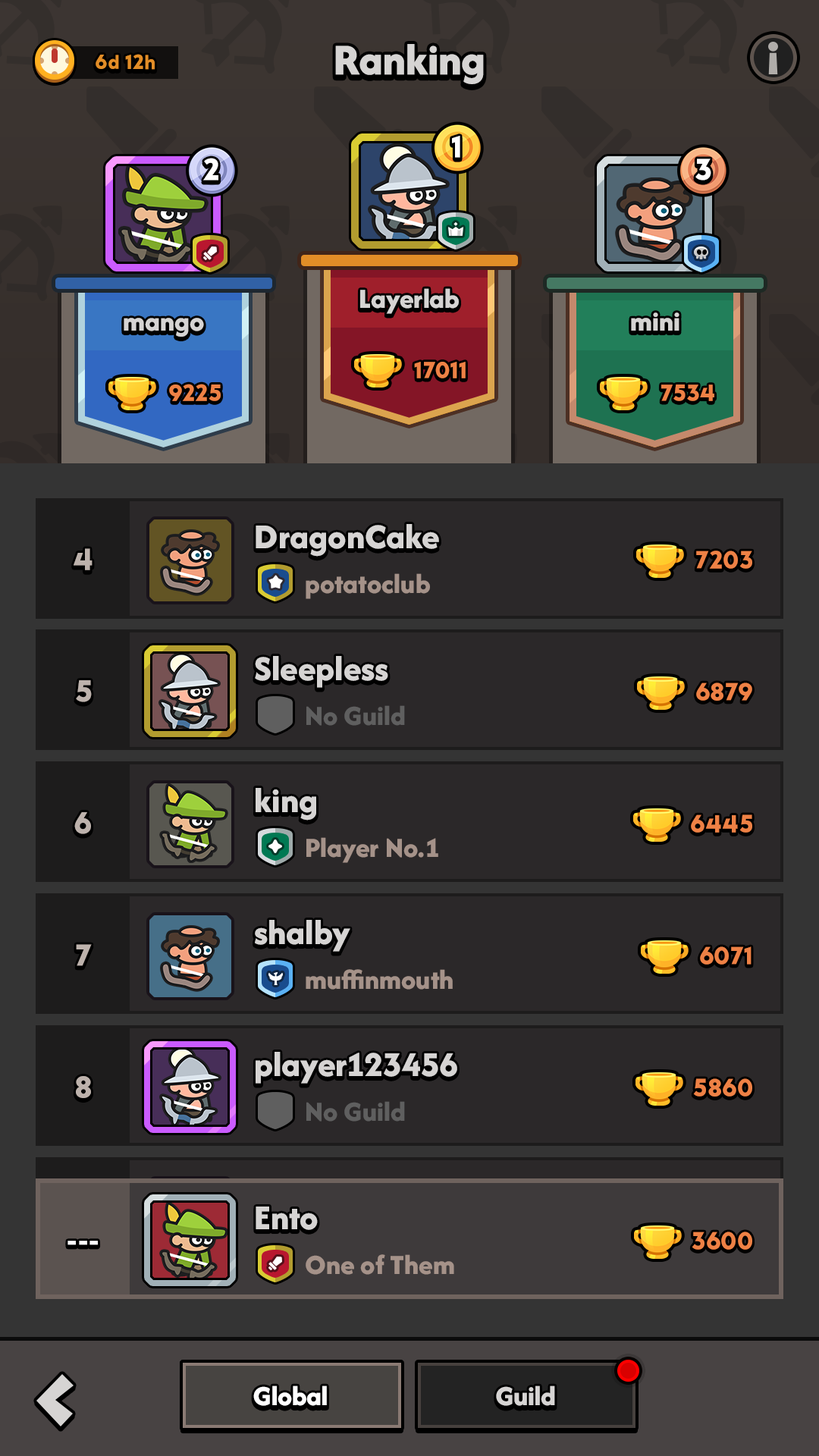
<style>
.page{position:relative;width:819px;height:1456px;background:#2b2829}
.page>*{position:absolute;margin:0}
.t1{font:21.2px "LTAvocado-Bold";color:#e28d27}
.t2{font:45.5px "AfacadFlux-ExtraBold";color:#d6d4d3}
.t3{font:31.8px "LTAvocado-Bold";color:#ffffff}
.t4{font:28.8px "AfacadFlux-ExtraBold";color:#d6d4d3}
.t5{font:24.3px "LTAvocado-Bold";color:#ee8145}
.t6{font:36.4px "AfacadFlux-ExtraBold";color:#d6d4d3}
.t7{font:31.8px "LTAvocado-Bold";color:#bdb2ac}
.t8{font:25.8px "LTAvocado-Bold";color:#ee8145}
.t9{font:28.8px "AfacadFlux-ExtraBold";color:#a59289}
.t10{font:28.8px "AfacadFlux-ExtraBold";color:#5f5f5f}
.t11{font:28.8px "AfacadFlux-ExtraBold";color:#ffffff}
</style>
<div class="page">
<p class="t1" style="left:96px;top:54px;width:59px;height:16px">6d 12h</p>
<p class="t2" style="left:335px;top:44px;width:149px;height:40px">Ranking</p>
<p class="t3" style="left:452px;top:136px;width:8px;height:22px">1</p>
<p class="t3" style="left:203px;top:158px;width:15px;height:22px">2</p>
<p class="t3" style="left:695px;top:158px;width:16px;height:22px">3</p>
<p class="t4" style="left:360px;top:288px;width:99px;height:26px">Layerlab</p>
<p class="t4" style="left:124px;top:318px;width:80px;height:19px">mango</p>
<p class="t4" style="left:631px;top:312px;width:48px;height:19px">mini</p>
<p class="t5" style="left:414px;top:362px;width:52px;height:16px">17011</p>
<p class="t5" style="left:169px;top:384px;width:52px;height:17px">9225</p>
<p class="t5" style="left:661px;top:384px;width:53px;height:17px">7534</p>
<p class="t6" style="left:256px;top:524px;width:183px;height:33px">DragonCake</p>
<p class="t7" style="left:74px;top:548px;width:19px;height:22px">4</p>
<p class="t8" style="left:696px;top:551px;width:56px;height:18px">7203</p>
<p class="t9" style="left:306px;top:573px;width:124px;height:26px">potatoclub</p>
<p class="t6" style="left:255px;top:656px;width:133px;height:32px">Sleepless</p>
<p class="t7" style="left:76px;top:680px;width:16px;height:22px">5</p>
<p class="t8" style="left:696px;top:682px;width:56px;height:19px">6879</p>
<p class="t10" style="left:306px;top:705px;width:99px;height:21px">No Guild</p>
<p class="t6" style="left:256px;top:788px;width:60px;height:33px">king</p>
<p class="t7" style="left:74px;top:812px;width:17px;height:22px">6</p>
<p class="t8" style="left:691px;top:814px;width:61px;height:19px">6445</p>
<p class="t9" style="left:306px;top:837px;width:132px;height:26px">Player No.1</p>
<p class="t6" style="left:255px;top:920px;width:95px;height:32px">shalby</p>
<p class="t7" style="left:76px;top:944px;width:16px;height:22px">7</p>
<p class="t8" style="left:700px;top:946px;width:51px;height:19px">6071</p>
<p class="t9" style="left:306px;top:969px;width:147px;height:21px">muffinmouth</p>
<p class="t6" style="left:256px;top:1052px;width:201px;height:32px">player123456</p>
<p class="t7" style="left:76px;top:1076px;width:15px;height:22px">8</p>
<p class="t8" style="left:693px;top:1078px;width:59px;height:19px">5860</p>
<p class="t10" style="left:306px;top:1101px;width:99px;height:21px">No Guild</p>
<p class="t6" style="left:256px;top:1206px;width:62px;height:24px">Ento</p>
<p class="t3" style="left:67px;top:1241px;width:31px;height:4px">---</p>
<p class="t8" style="left:692px;top:1232px;width:60px;height:18px">3600</p>
<p class="t9" style="left:306px;top:1254px;width:148px;height:21px">One of Them</p>
<p class="t11" style="left:253px;top:1385px;width:74px;height:21px">Global</p>
<p class="t4" style="left:496px;top:1385px;width:59px;height:21px">Guild</p>
</div>
